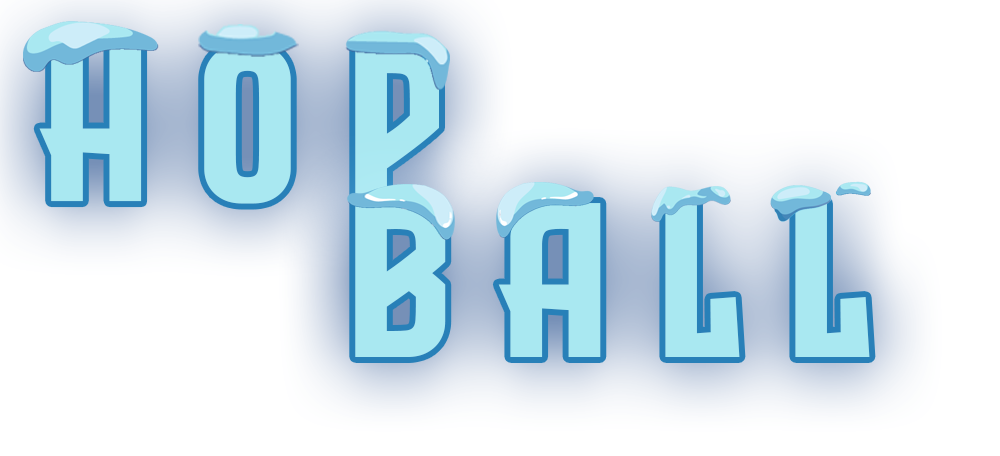
<style>
.page{position:relative;width:1000px;height:456px;background:#ffffff}
.page>*{position:absolute;margin:0}
.t1{font:52.9px "EvilEmpire";color:#a9e8f1}
</style>
<div class="page">
<p class="t1" style="left:39px;top:44px;width:400px;height:160px">H o p</p>
<p class="t1" style="left:355px;top:203px;width:515px;height:154px">B a l l</p>
</div>
